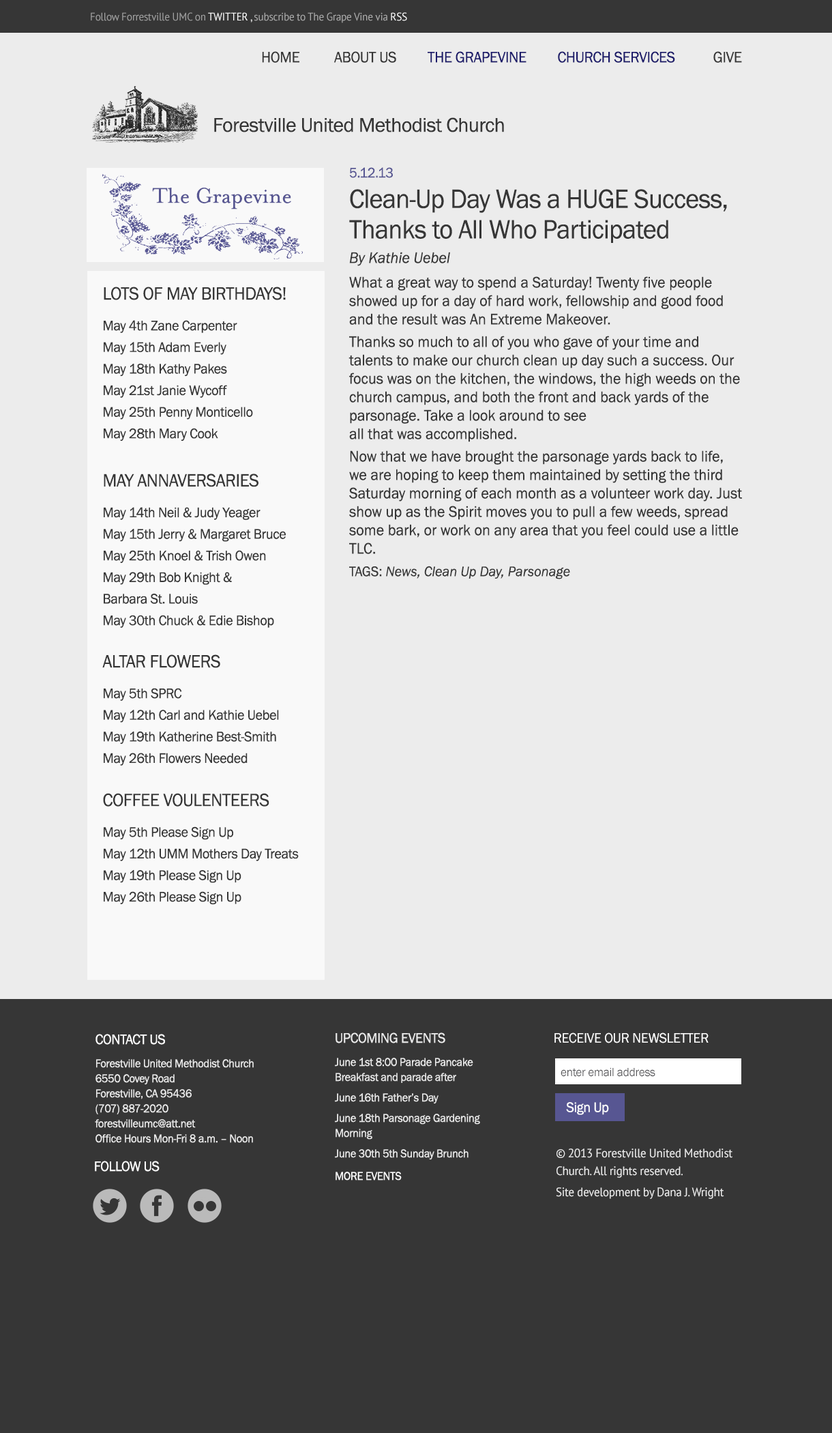
<style>
.page{position:relative;width:832px;height:1433px;background:#ececec}
.page>*{position:absolute;margin:0}
.t1{font:10.9px "PTSans-Regular";letter-spacing:-0.02em;color:#acacac;scale:0.96 1}
.t2{font:10.9px "PTSans-Regular";letter-spacing:-0.02em;color:#a1a1a1;scale:0.96 1}
.t3{font:10.9px "PTSans-Regular";letter-spacing:-0.02em;color:#ffffff;scale:0.96 1}
.t4{font:10.9px "PTSans-Regular";letter-spacing:-0.02em;color:#ebebeb;scale:0.96 1}
.t5{font:15.7px "FranklinGothic-Book";letter-spacing:-0.02em;color:#1c1b6a;scale:0.96 1}
.t6{font:15.7px "FranklinGothic-Book";letter-spacing:-0.02em;color:#363636;scale:0.96 1}
.t7{font:20.5px "FranklinGothic-Book";letter-spacing:-0.02em;color:#363636}
.t8{font:15.7px/18.4px "FranklinGothic-Book";color:#363636;scale:0.96 1}
.t9{font:14.3px/30.5px "FranklinGothic-Book";letter-spacing:-0.02em;color:#575692;scale:0.96 1}
.t10{font:27.3px/30.5px "FranklinGothic-Book";letter-spacing:-0.02em;color:#363636;scale:0.96 1}
.t11{font:15.7px/24.6px "FranklinGothic-BookItalic";color:#363636;scale:0.96 1}
.t12{font:15.7px/24.6px "FranklinGothic-Book";color:#363636;scale:0.96 1}
.t13{font:15.7px/22.5px "FranklinGothic-Book";color:#363636;scale:0.96 1}
.t14{font:14.3px/22.5px "FranklinGothic-Book";color:#363636;scale:0.96 1}
.t15{font:14.3px/22.5px "FranklinGothic-BookItalic";color:#363636;scale:0.96 1}
.t16{font:24.6px "MrsEavesOT-Roman";color:#575692;scale:0.96 1}
.t17{font:14.3px/21.6px "FranklinGothic-Book";letter-spacing:-0.02em;color:#363636;scale:0.96 1}
.t18{font:18.4px/24.3px "FranklinGothic-Book";letter-spacing:-0.02em;color:#363636;scale:0.96 1}
.t19{font:14.3px/30.7px "FranklinGothic-Book";letter-spacing:-0.02em;color:#363636;scale:0.96 1}
.t20{font:18.4px/26.6px "FranklinGothic-Book";letter-spacing:-0.02em;color:#363636;scale:0.96 1}
.t21{font:18.4px/21.1px "FranklinGothic-Book";letter-spacing:-0.02em;color:#363636;scale:0.96 1}
.t22{font:18.4px/21.6px "FranklinGothic-Book";letter-spacing:-0.02em;color:#363636;scale:0.96 1}
.t23{font:11.6px/15px "FranklinGothic-Book";letter-spacing:-0.02em;color:#ebebeb;scale:0.96 1}
.t24{font:14.3px/5.9px "FranklinGothic-Book";letter-spacing:-0.02em;color:#ffffff;scale:0.96 1}
.t25{font:11.6px/23.2px "FranklinGothic-Book";letter-spacing:-0.02em;color:#ebebeb;scale:0.96 1}
.t26{font:11.6px/20.5px "FranklinGothic-Book";letter-spacing:-0.02em;color:#ebebeb;scale:0.96 1}
.t27{font:14.3px/13.6px "FranklinGothic-Book";letter-spacing:-0.02em;color:#ebebeb;scale:0.96 1}
.t28{font:11.6px/22.5px "FranklinGothic-Book";letter-spacing:-0.02em;color:#ffffff;scale:0.96 1}
.t29{font:14.3px "FranklinGothic-Book";letter-spacing:-0.02em;color:#ffffff;scale:0.96 1}
.t30{font:12.3px "FranklinGothic-Book";letter-spacing:-0.02em;color:#565659;scale:0.96 1}
.t31{font:12.3px/18.2px "PTSans-Regular";letter-spacing:-0.02em;color:#ebebeb;scale:0.96 1}
.t32{font:12.3px/20.9px "PTSans-Regular";letter-spacing:-0.02em;color:#ebebeb;scale:0.96 1}
</style>
<div class="page">
<p class="t1" style="left:91px;top:12px;width:316px;height:11px"><span class="t2">Follow Forrestville UMC on </span><span class="t3">TWITTER</span><span class="t4"> , </span>subscribe to The Grape Vine via <span class="t3">RSS</span></p>
<p class="t5" style="left:262px;top:51px;width:480px;height:12px"><span class="t6">HOME          ABOUT US         </span>THE GRAPEVINE         CHURCH SERVICES<span class="t6">           GIVE</span></p>
<p class="t7" style="left:214px;top:117px;width:290px;height:15px">Forestville United Methodist Church</p>
<p class="t8" style="left:349px;top:167px;width:393px;height:412px"><span class="t9">5.12.13<br></span><span class="t10">Clean-Up Day Was a HUGE Success, Thanks to All Who Participated<br></span><span class="t11">By Kathie Uebel<br></span><span class="t12">What a great way to spend a Saturday! Twenty five people </span>showed up for a day of hard work, fellowship and good food and the result was An Extreme Makeover. <br><span class="t13">Thanks so much to all of you who gave of your time and </span>talents to make our church clean up day such a success. Our focus was on the kitchen, the windows, the high weeds on the church campus, and both the front and back yards of the parsonage. Take a look around to see<br>all that was accomplished.<br><span class="t13">Now that we have brought the parsonage yards back to life, </span>we are hoping to keep them maintained by setting the third Saturday morning of each month as a volunteer work day. Just show up as the Spirit moves you to pull a few weeds, spread some bark, or work on any area that you feel could use a little TLC.<br><span class="t14">TAGS: </span><span class="t15">News, Clean Up Day, Parsonage</span></p>
<p class="t16" style="left:152px;top:188px;width:139px;height:21px">The Grapevine</p>
<p class="t17" style="left:102px;top:287px;width:197px;height:618px"><span class="t18">LOTS OF MAY BIRTHDAYS!<br></span><span class="t19">May 4th Zane Carpenter<br></span>May 15th Adam Everly<br>May 18th Kathy Pakes<br>May 21st Janie Wycoff<br>May 25th Penny Monticello<br>May 28th Mary Cook<br><br><span class="t20">MAY ANNAVERSARIES<br></span><span class="t19">May 14th Neil &amp; Judy Yeager<br></span>May 15th Jerry &amp; Margaret Bruce<br>May 25th Knoel &amp; Trish Owen<br>May 29th Bob Knight &amp;<br>Barbara St. Louis<br>May 30th Chuck &amp; Edie Bishop<br><span class="t21"><br>ALTAR FLOWERS<br></span><span class="t19">May 5th SPRC<br></span>May 12th Carl and Kathie Uebel<br>May 19th Katherine Best-Smith<br>May 26th Flowers Needed<br><br><span class="t22">COFFEE VOULENTEERS<br></span><span class="t19">May 5th Please Sign Up<br></span>May 12th UMM Mothers Day Treats<br>May 19th Please Sign Up<br>May 26th Please Sign Up</p>
<p class="t23" style="left:95px;top:1034px;width:159px;height:109px"><span class="t24">CONTACT US<br></span><span class="t25">Forestville United Methodist Church<br></span>6550 Covey Road<br>Forestville, CA 95436<br>(707) 887-2020<br>forestvilleumc@att.net<br>Office Hours Mon-Fri 8 a.m. – Noon</p>
<p class="t26" style="left:335px;top:1032px;width:145px;height:148px"><span class="t27">UPCOMING EVENTS<br></span><span class="t25">June 1st 8:00 Parade Pancake </span><span class="t23">Breakfast and parade after<br></span>June 16th Father’s Day<br>June 18th Parsonage Gardening<br><span class="t23">Morning<br></span>June 30th 5th Sunday Brunch<br><span class="t28">MORE EVENTS</span></p>
<p class="t29" style="left:555px;top:1032px;width:154px;height:11px">RECEIVE OUR NEWSLETTER</p>
<p class="t30" style="left:561px;top:1068px;width:95px;height:9px">enter email address</p>
<p class="t29" style="left:566px;top:1102px;width:43px;height:13px">Sign Up</p>
<p class="t31" style="left:556px;top:1148px;width:177px;height:51px">© 2013 Forestville United Methodist Church. All rights reserved.  <br><span class="t32">Site development by Dana J. Wright</span></p>
<p class="t29" style="left:95px;top:1160px;width:65px;height:11px">FOLLOW US</p>
</div>
